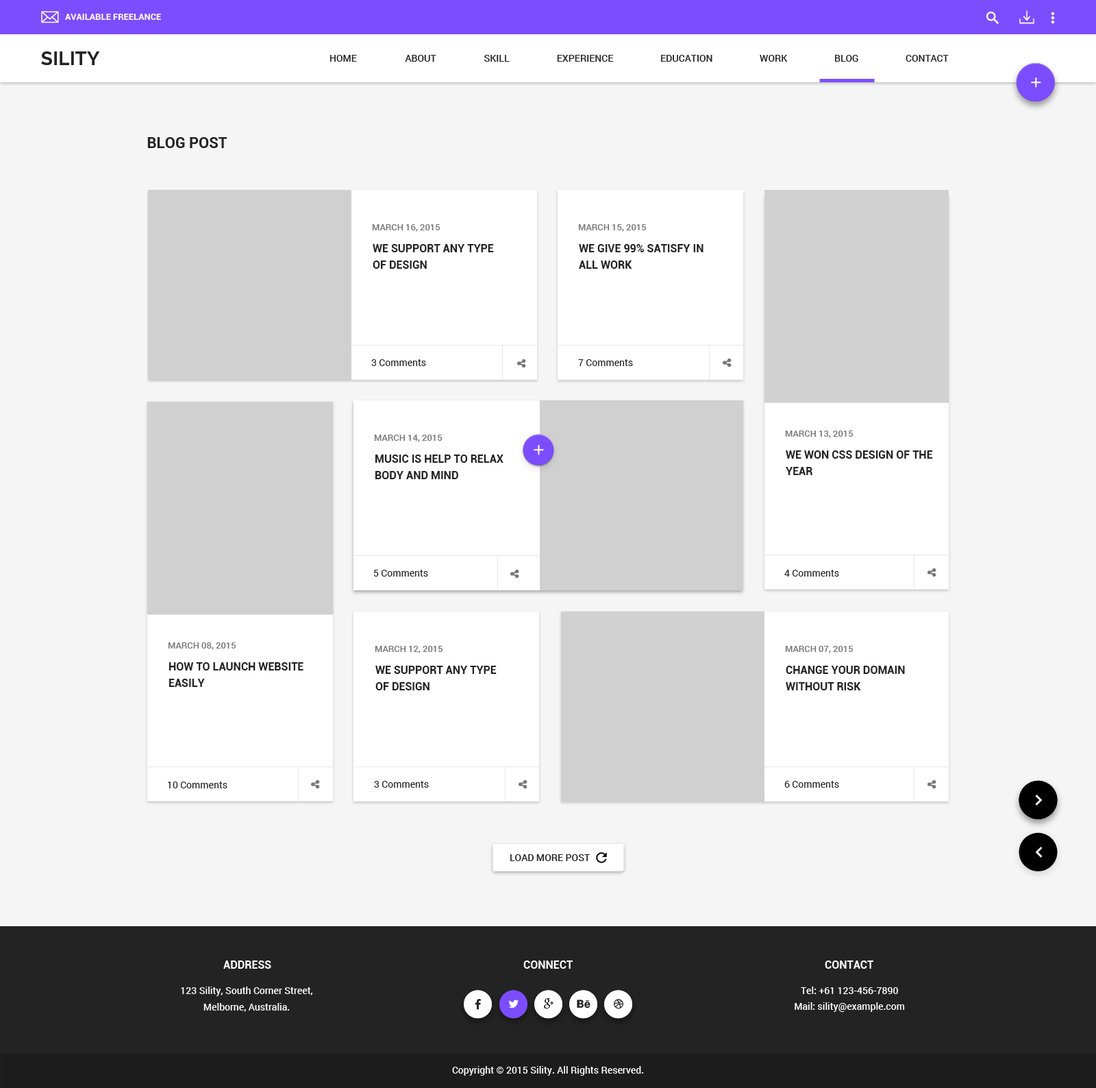
<style>
.page{position:relative;width:1096px;height:1088px;background:#f5f5f5}
.page>*{position:absolute;margin:0}
.t1{font:8.9px "Roboto-Bold";color:#ffffff;text-transform:uppercase}
.t2{font:19.2px "Raleway-Bold";color:#232323}
.t3{font:9.6px "Roboto-Medium";color:#232323;text-transform:uppercase}
.t4{font:15.1px "Roboto-Bold";color:#232323}
.t5{font:8.9px "Roboto-Medium";color:#777777;text-transform:uppercase}
.t6{font:11px/16.4px "Roboto-Bold";color:#232323;text-transform:uppercase}
.t7{font:9.6px "Roboto-Regular";color:#232323}
.t8{font:9.6px "Roboto-Medium";color:#232323}
.t9{font:11px "Roboto-Bold";color:#ffffff;text-transform:uppercase}
.t10{font:9.6px/16.4px "Roboto-Medium";color:#ffffff}
.t11{font:9.6px "Roboto-Medium";color:#ffffff}
</style>
<div class="page">
<p class="t1" style="left:65px;top:14px;width:96px;height:6px">available freelance</p>
<p class="t2" style="left:41px;top:51px;width:59px;height:14px">SILITY</p>
<p class="t3" style="left:330px;top:55px;width:27px;height:7px">home</p>
<p class="t3" style="left:405px;top:55px;width:32px;height:7px">about</p>
<p class="t3" style="left:484px;top:55px;width:26px;height:7px">skill</p>
<p class="t3" style="left:557px;top:55px;width:57px;height:7px">experience</p>
<p class="t3" style="left:661px;top:55px;width:52px;height:7px">education</p>
<p class="t3" style="left:760px;top:55px;width:28px;height:7px">work</p>
<p class="t3" style="left:835px;top:55px;width:24px;height:7px">blog</p>
<p class="t3" style="left:906px;top:55px;width:43px;height:7px">Contact</p>
<p class="t4" style="left:147px;top:137px;width:81px;height:11px">BLOG POST</p>
<p class="t5" style="left:372px;top:224px;width:68px;height:8px">MARCH 16, 2015</p>
<p class="t5" style="left:578px;top:224px;width:68px;height:8px">MARCH 15, 2015</p>
<p class="t6" style="left:373px;top:244px;width:121px;height:25px">WE SUPPORT ANY TYPE <br>OF DESIGN</p>
<p class="t6" style="left:579px;top:244px;width:125px;height:25px">we give 99% satisfy in<br>all work</p>
<p class="t7" style="left:371px;top:359px;width:55px;height:7px">3 Comments</p>
<p class="t7" style="left:578px;top:359px;width:55px;height:7px">7 Comments</p>
<p class="t5" style="left:374px;top:434px;width:68px;height:8px">MARCH 14, 2015</p>
<p class="t5" style="left:785px;top:430px;width:68px;height:8px">MARCH 13, 2015</p>
<p class="t6" style="left:376px;top:454px;width:128px;height:25px">music is help to relax<br>body and mind</p>
<p class="t6" style="left:786px;top:450px;width:147px;height:25px">we won css design of the <br>year</p>
<p class="t7" style="left:374px;top:569px;width:54px;height:7px">5 Comments</p>
<p class="t7" style="left:785px;top:569px;width:54px;height:7px">4 Comments</p>
<p class="t5" style="left:168px;top:642px;width:68px;height:8px">MARCH 08, 2015</p>
<p class="t5" style="left:375px;top:646px;width:68px;height:7px">MARCH 12, 2015</p>
<p class="t5" style="left:785px;top:646px;width:68px;height:7px">MARCH 07, 2015</p>
<p class="t6" style="left:169px;top:662px;width:135px;height:25px">how to launch website<br>easily</p>
<p class="t6" style="left:376px;top:665px;width:121px;height:25px">WE SUPPORT ANY TYPE <br>OF DESIGN</p>
<p class="t6" style="left:786px;top:665px;width:119px;height:25px">change your domain<br>without risk</p>
<p class="t7" style="left:168px;top:781px;width:60px;height:7px">10 Comments</p>
<p class="t7" style="left:374px;top:781px;width:55px;height:6px">3 Comments</p>
<p class="t7" style="left:785px;top:781px;width:54px;height:6px">6 Comments</p>
<p class="t8" style="left:511px;top:854px;width:79px;height:7px">LOAD MORE POST</p>
<p class="t9" style="left:223px;top:960px;width:48px;height:8px">Address</p>
<p class="t9" style="left:524px;top:960px;width:49px;height:8px">connect</p>
<p class="t9" style="left:825px;top:960px;width:49px;height:8px">contact</p>
<p class="t10" style="left:181px;top:986px;width:132px;height:25px;text-align:center">123 Sility, South Corner Street,<br>Melborne, Australia.</p>
<p class="t11" style="left:801px;top:986px;width:97px;height:8px">Tel: +61 123-456-7890</p>
<p class="t11" style="left:795px;top:1002px;width:110px;height:9px">Mail: sility@example.com</p>
<p class="t11" style="left:452px;top:1066px;width:192px;height:9px">Copyright © 2015 Sility. All Rights Reserved.</p>
</div>
